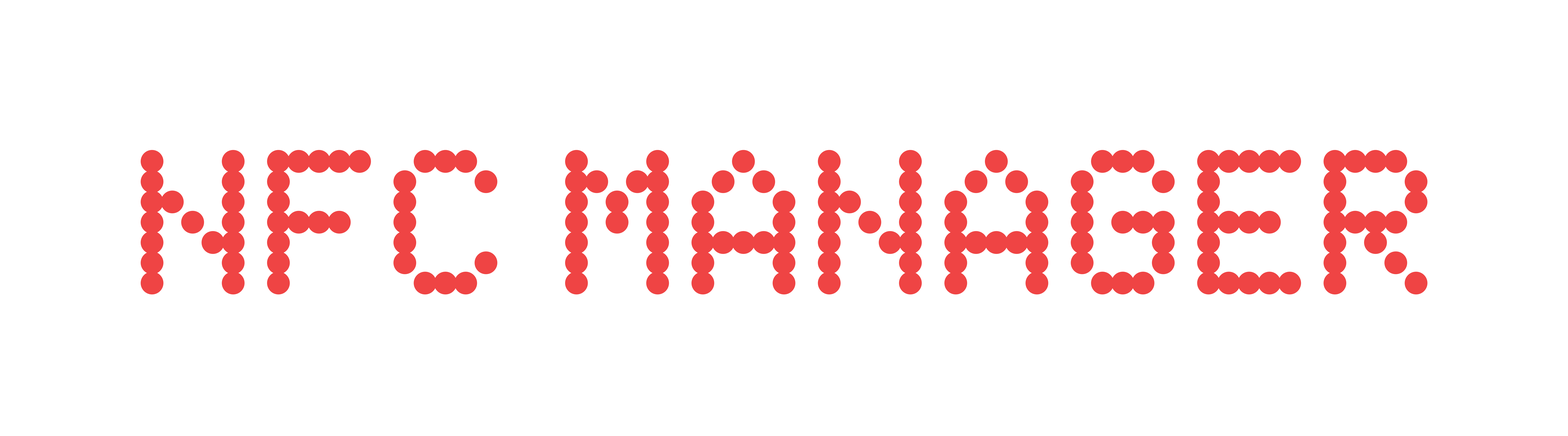
<style>
.page{position:relative;width:1568px;height:436px;background:#ffffff}
.page>*{position:absolute;margin:0}
.t1{font:91.3px "NothingFont5x7";letter-spacing:0.025em;color:#ef4444;text-transform:uppercase;font-weight:bold}
</style>
<div class="page">
<p class="t1" style="left:141px;top:150px;width:1287px;height:145px">NFC Manager</p>
</div>
